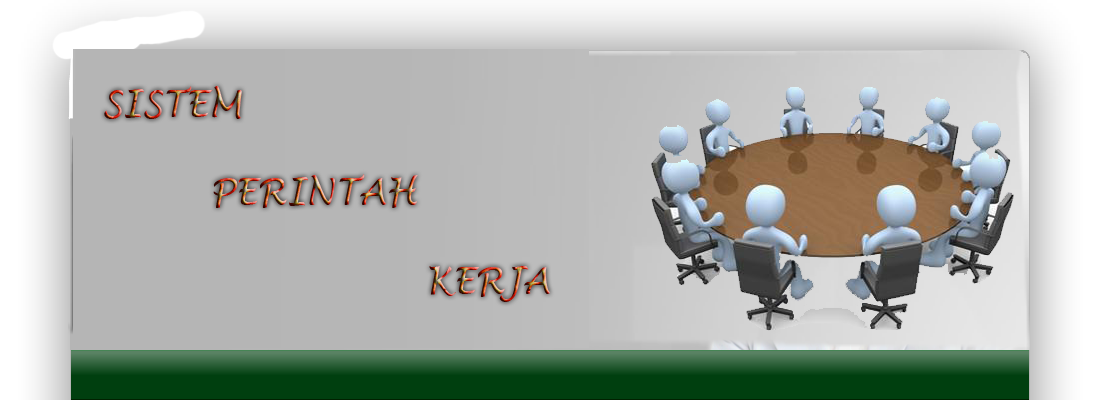
<style>
.page{position:relative;width:1100px;height:400px}
.page>*{position:absolute;margin:0}
.t1{font:36.8px "LucidaHandwriting-Italic"}
</style>
<div class="page">
<p class="t1" style="left:104px;top:86px;width:447px;height:216px">SISTEM <br><br>   PERINTAH <br>     <br>         KERJA</p>
</div>
